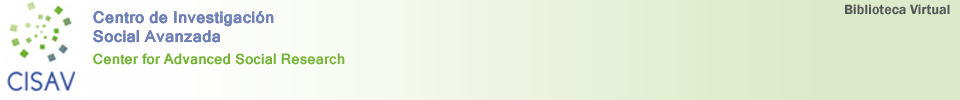
<style>
.page{position:relative;width:960px;height:100px}
.page>*{position:absolute;margin:0}
.t1{font:14px "FranklinGothic-Demi";color:#57585b}
.t2{font:16px "Kartika-Bold";color:#6e7fb8}
.t3{font:14px "Kartika-Bold";color:#72b333}
</style>
<div class="page">
<p class="t1" style="left:845px;top:4px;width:105px;height:11px">Biblioteca Virtual</p>
<p class="t2" style="left:93px;top:11px;width:181px;height:32px">Centro de Investigación <br>Social Avanzada</p>
<p class="t2" style="left:93px;top:11px;width:181px;height:32px">Centro de Investigación <br>Social Avanzada</p>
<p class="t3" style="left:93px;top:53px;width:252px;height:12px">Center for Advanced Social Research</p>
</div>
